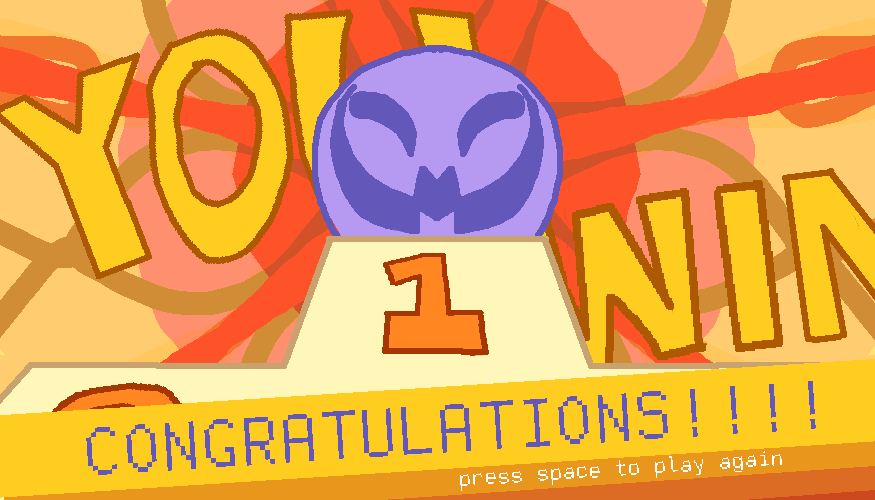
<style>
.page{position:relative;width:875px;height:500px;background:#ffcd20}
.page>*{position:absolute;margin:0}
.t1{font:75.8px "FreePixel-Regular";color:#6357ba}
.t2{font:25px "FreePixel-Regular";color:#ffffff}
</style>
<div class="page">
<p class="t1" style="left:86px;top:381px;width:730px;height:94px;rotate:-4deg">CONGRATULATIONS!!!!</p>
<p class="t2" style="left:460px;top:451px;width:322px;height:40px;rotate:-4deg">press space to play again</p>
</div>
